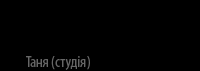
<style>
.page{position:relative;width:200px;height:71px;background:#000000}
.page>*{position:absolute;margin:0}
.t1{font:16px "MyriadPro-Cond";color:#666666}
</style>
<div class="page">
<p class="t1" style="left:26px;top:56px;width:64px;height:14px">Таня (студія)</p>
</div>
